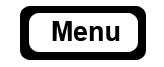
<style>
.page{position:relative;width:164px;height:67px;background:#ffffff}
.page>*{position:absolute;margin:0}
.t1{font:26.7px "Arial-BoldMT";color:#000000}
</style>
<div class="page">
<p class="t1" style="left:52px;top:21px;width:68px;height:20px">Menu</p>
</div>
